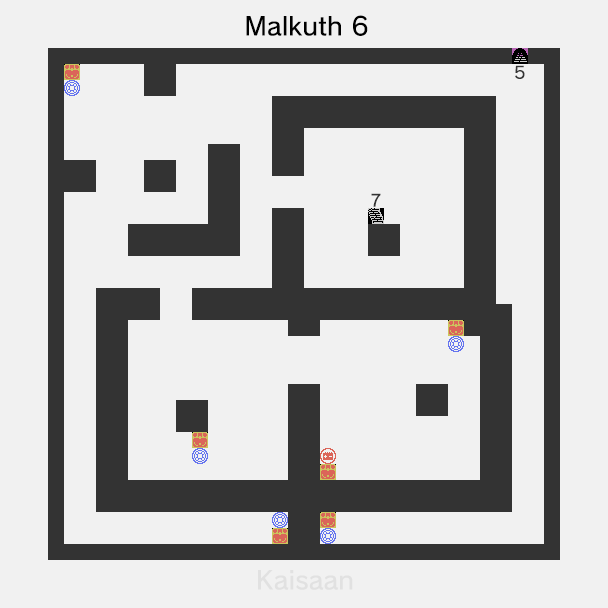
<style>
.page{position:relative;width:608px;height:608px;background:#f1f1f1}
.page>*{position:absolute;margin:0}
.t1{font:25px "nintendoNTLG-DB002";color:#000000}
.t2{font:16.7px "nintendoNTLG-DB002";color:#333333}
.t3{font:25px "nintendoNTLG-DB002";color:#e1e1e1}
</style>
<div class="page">
<p class="t1" style="left:246px;top:15px;width:122px;height:21px">Malkuth 6</p>
<p class="t2" style="left:515px;top:65px;width:10px;height:14px">5</p>
<p class="t2" style="left:371px;top:193px;width:10px;height:14px">7</p>
<p class="t3" style="left:258px;top:570px;width:95px;height:20px">Kaisaan</p>
</div>
